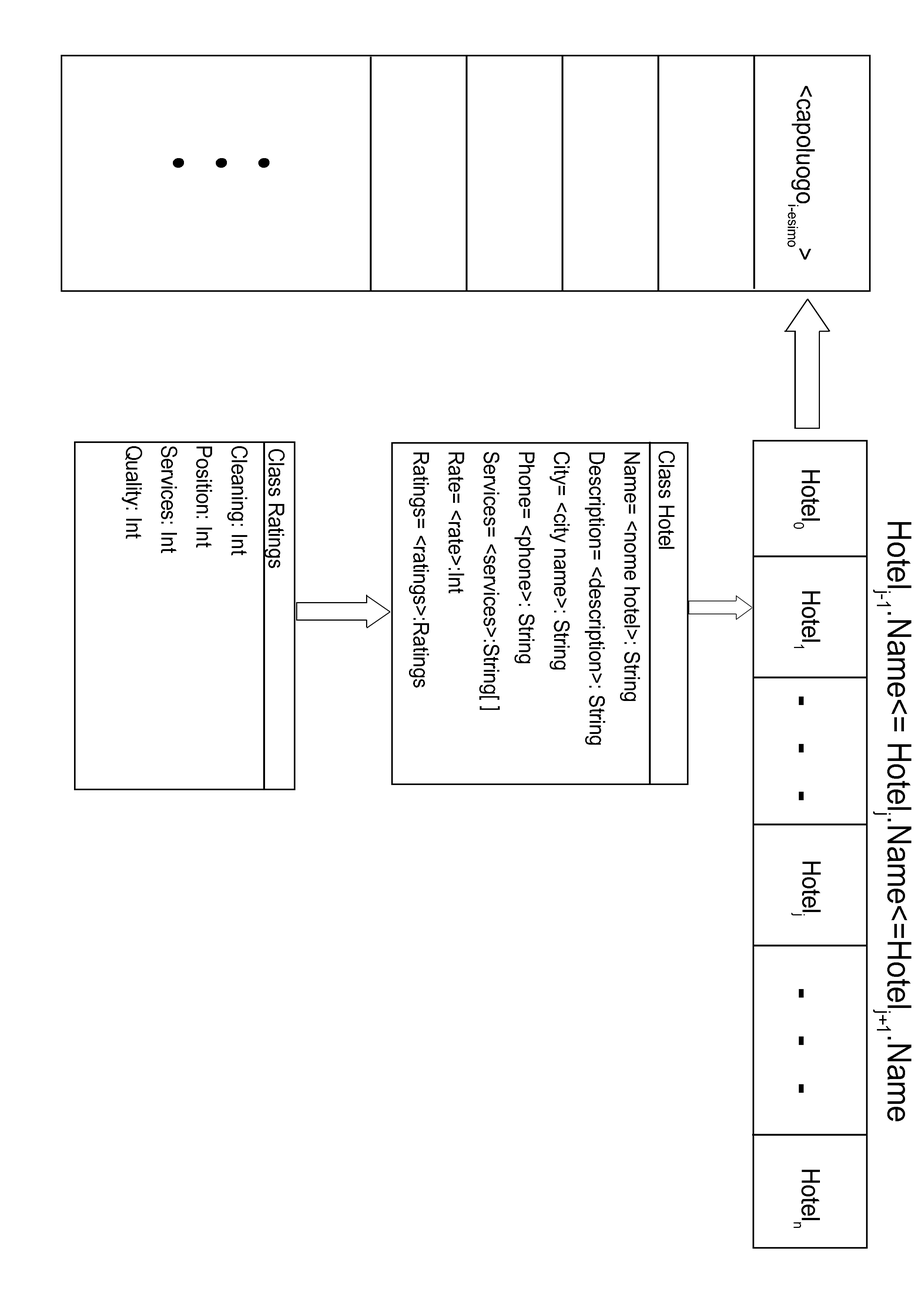
<style>
.page{position:relative;width:918px;height:1299px;background:#ffffff}
.page>*{position:absolute;margin:0}
.t1{font:25.1px "ArialNarrow";color:#000000;scale:1.12 1}
.t2{font:63.6px "KristenITC-Regular";letter-spacing:0.3em;color:#000000;scale:1.12 1}
.t3{font:36.6px "ArialNarrow";color:#000000;scale:1.12 1}
.t4{font:32.8px "ArialNarrow";color:#000000;scale:1.12 1}
.t5{font:48px "ArialNarrow";color:#000000;scale:2.17 1}
</style>
<div class="page">
<p class="t1" style="left:787px;top:86px;width:28px;height:174px;rotate:90deg">&lt;capoluogoi-esimo&gt;</p>
<p class="t2" style="left:173px;top:158px;width:97px;height:10px">...</p>
<p class="t3" style="left:122px;top:446px;width:126px;height:109px;rotate:90deg">Cleaning: Int<br>Position: Int<br>Services: Int<br>Quality: Int</p>
<p class="t3" style="left:264px;top:449px;width:21px;height:119px;rotate:90deg">Class Ratings</p>
<p class="t3" style="left:409px;top:452px;width:231px;height:293px;rotate:90deg">Name= &lt;nome hotel&gt;: String<br>Description= &lt;description&gt;: String<br>City= &lt;city name&gt;: String<br>Phone= &lt;phone&gt;: String<br>Services= &lt;services&gt;:String[ ]<br>Rate= &lt;rate&gt;:Int<br>Ratings= &lt;ratings&gt;:Ratings</p>
<p class="t3" style="left:659px;top:451px;width:16px;height:98px;rotate:90deg">Class Hotel</p>
<p class="t1" style="left:794px;top:470px;width:26px;height:59px;rotate:90deg">Hotel0</p>
<p class="t4" style="left:873px;top:522px;width:38px;height:599px;rotate:90deg">Hotelj-1.Name&lt;= Hotelj.Name&lt;=Hotelj+1.Name</p>
<p class="t1" style="left:794px;top:591px;width:26px;height:57px;rotate:90deg">Hotel1</p>
<p class="t5" style="left:799px;top:696px;width:5px;height:104px;rotate:90deg">. . .</p>
<p class="t1" style="left:792px;top:862px;width:29px;height:53px;rotate:90deg">Hotelj</p>
<p class="t5" style="left:799px;top:989px;width:5px;height:104px;rotate:90deg">. . .</p>
<p class="t1" style="left:794px;top:1170px;width:26px;height:58px;rotate:90deg">Hoteln</p>
</div>
